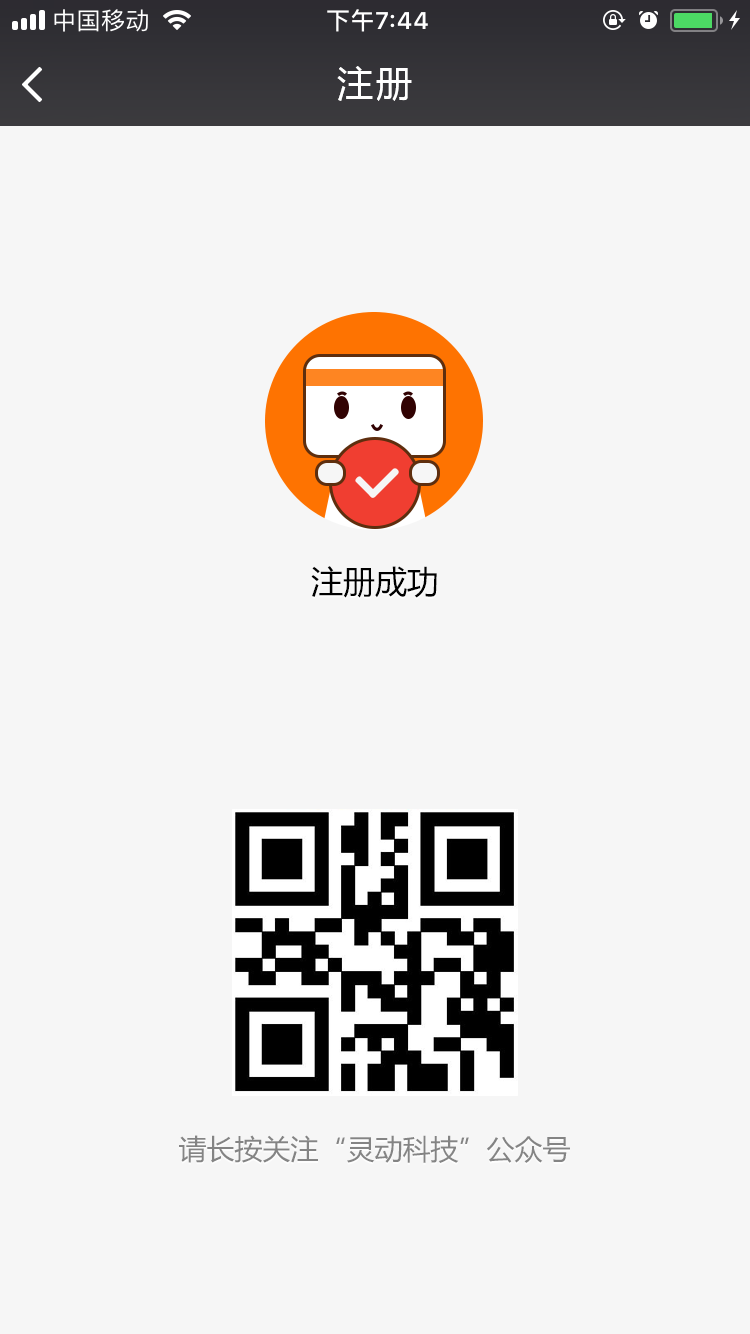
<style>
.page{position:relative;width:750px;height:1334px;background:#f6f6f6}
.page>*{position:absolute;margin:0}
.t1{font:36px "MicrosoftYaHei";letter-spacing:0.08em;color:#ffffff}
.t2{font:32px "MicrosoftYaHei";color:#000000}
.t3{font:28px "MicrosoftYaHei";color:#747474}
</style>
<div class="page">
<p class="t1" style="left:337px;top:66px;width:75px;height:35px">注册</p>
<p class="t2" style="left:311px;top:566px;width:126px;height:32px">注册成功</p>
<p class="t3" style="left:179px;top:1135px;width:391px;height:28px">请长按关注“灵动科技”公众号</p>
</div>
